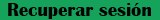
<style>
.page{position:relative;width:160px;height:20px;background:#15a35b}
.page>*{position:absolute;margin:0}
.t1{font:18.7px "BritannicBold";color:#000000}
</style>
<div class="page">
<p class="t1" style="left:8px;top:3px;width:143px;height:16px">Recuperar sesión</p>
</div>
